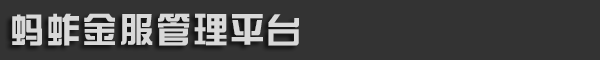
<style>
.page{position:relative;width:600px;height:60px;background:#333333}
.page>*{position:absolute;margin:0}
.t1{font:35px "FZZYJW--GB1-0";letter-spacing:0.05em;color:#d9d9d9}
</style>
<div class="page">
<p class="t1" style="left:12px;top:13px;width:287px;height:33px">蚂蚱金服管理平台</p>
</div>
